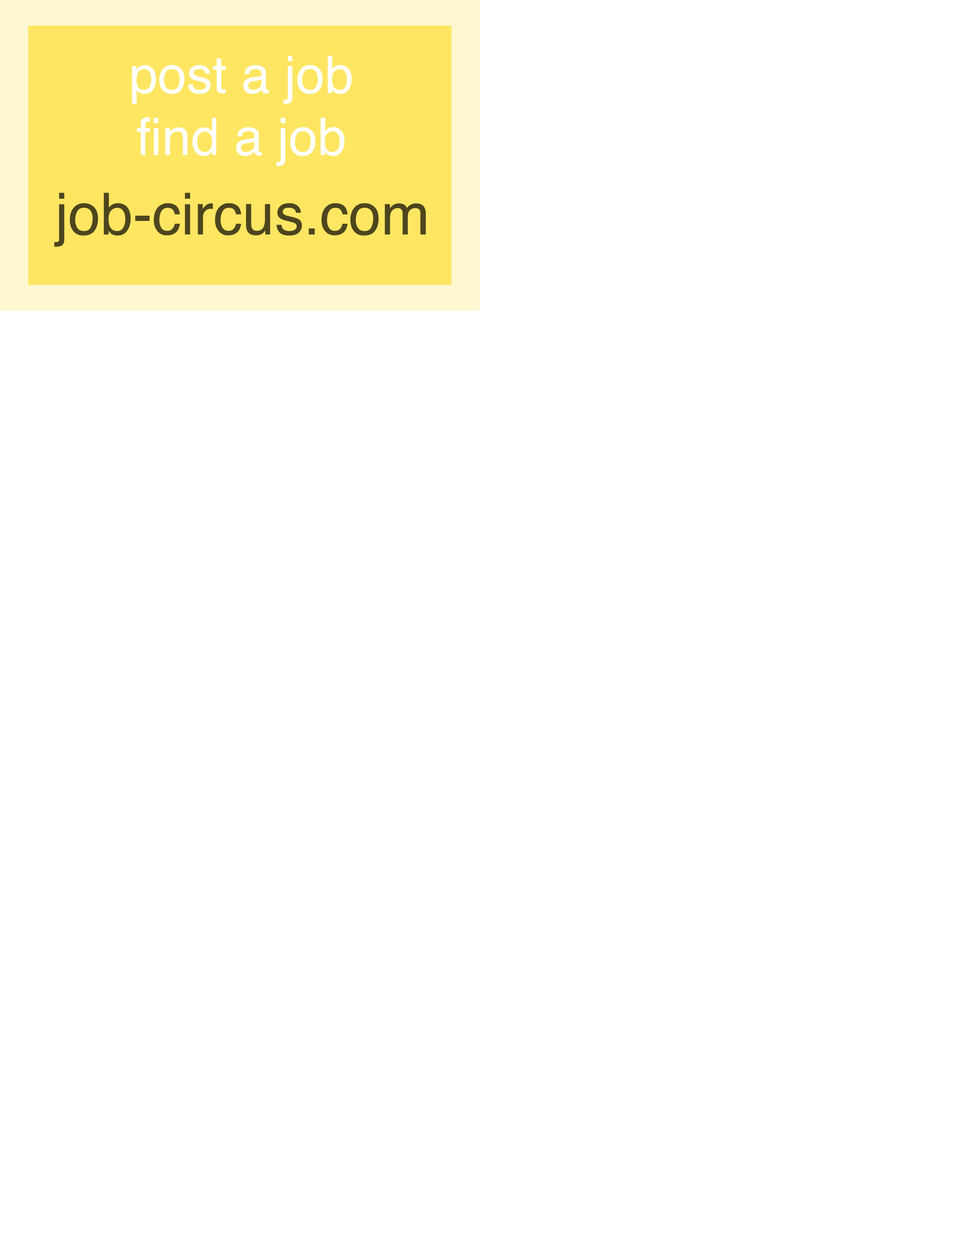
<style>
.page{position:relative;width:960px;height:1242px;background:#ffffff}
.page>*{position:absolute;margin:0}
.t1{font:51.8px "Helvetica";color:#feffff}
.t2{font:58px "Helvetica";color:#4d451e}
</style>
<div class="page">
<p class="t1" style="left:132px;top:56px;width:220px;height:110px;text-align:center">post a job<br>find a job</p>
<p class="t2" style="left:54px;top:193px;width:372px;height:54px">job-circus.com</p>
</div>
